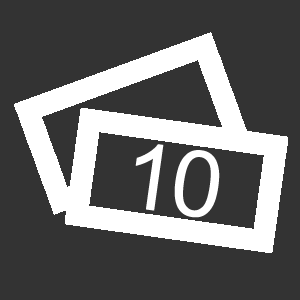
<style>
.page{position:relative;width:300px;height:300px;background:#333333}
.page>*{position:absolute;margin:0}
.t1{font:92px "ArialMT";letter-spacing:0.025em;color:#ffffff;text-transform:uppercase}
</style>
<div class="page">
<p class="t1" style="left:135px;top:144px;width:85px;height:74px;rotate:8deg">10</p>
</div>
